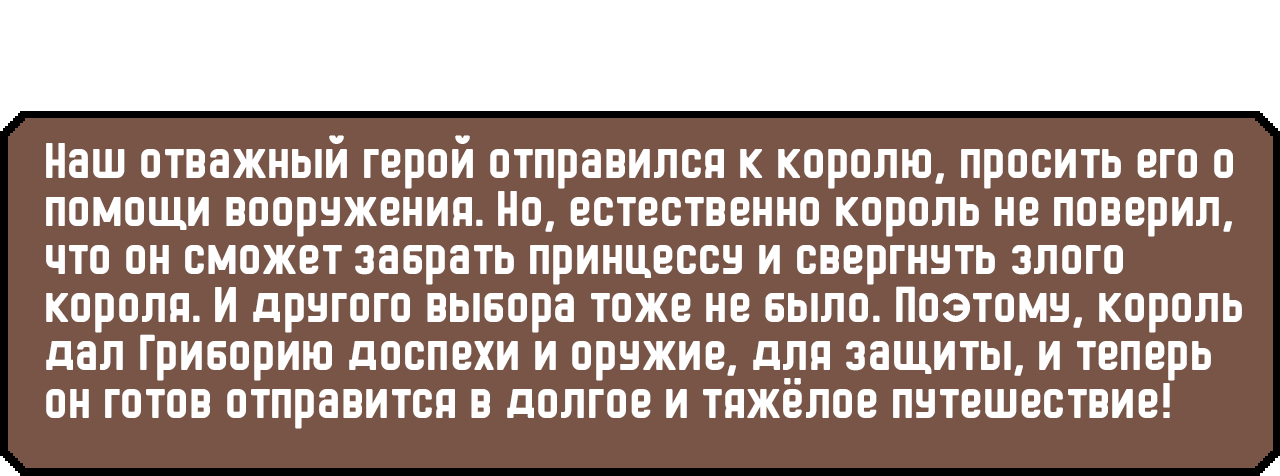
<style>
.page{position:relative;width:1280px;height:476px;background:#795548}
.page>*{position:absolute;margin:0}
.t1{font:48px/48px "HermanoMayor";color:#ffffff}
</style>
<div class="page">
<p class="t1" style="left:46px;top:135px;width:1196px;height:294px">Наш отважный герой отправился к королю, просить его о помощи вооружения. Но, естественно король не поверил, что он сможет забрать принцессу и свергнуть злого короля. И другого выбора тоже не было. Поэтому, король дал Гриборию доспехи и оружие, для защиты, и теперь он готов отправится в долгое и тяжёлое путешествие!</p>
</div>
